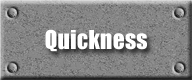
<style>
.page{position:relative;width:192px;height:80px}
.page>*{position:absolute;margin:0}
.t1{font:24px "Impact";color:#ffffff}
</style>
<div class="page">
<p class="t1" style="left:45px;top:29px;width:102px;height:23px">Quickness</p>
</div>
